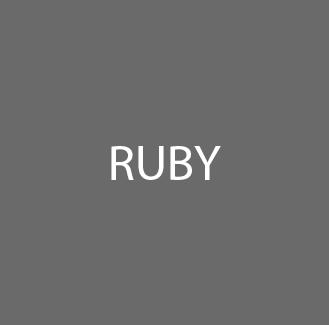
<style>
.page{position:relative;width:329px;height:325px;background:#6a6a6a}
.page>*{position:absolute;margin:0}
.t1{font:50px "MyriadPro-Regular";color:#ffffff}
</style>
<div class="page">
<p class="t1" style="left:111px;top:146px;width:110px;height:34px">RUBY</p>
</div>
